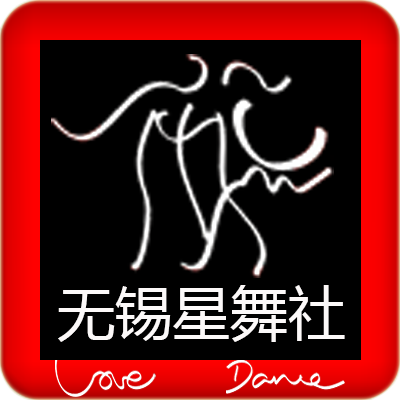
<style>
.page{position:relative;width:400px;height:400px;background:#000000}
.page>*{position:absolute;margin:0}
.t1{font:57.8px "MicrosoftYaHei";color:#fcf9f9}
</style>
<div class="page">
<p class="t1" style="left:58px;top:285px;width:287px;height:57px">无锡星舞社</p>
</div>
